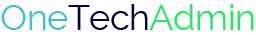
<style>
.page{position:relative;width:256px;height:35px;background:#ffffff}
.page>*{position:absolute;margin:0}
.t1{font:35.7px "Raleway";letter-spacing:-0.02em;color:#21eb57}
.t2{font:35.7px "Raleway";letter-spacing:-0.02em;color:#3ec1d5}
.t3{font:35.7px "Raleway";letter-spacing:-0.02em;color:#000444}
</style>
<div class="page">
<p class="t1" style="left:1px;top:4px;width:253px;height:26px"><span class="t2">One</span><span class="t3">Tech</span>Admin</p>
</div>
